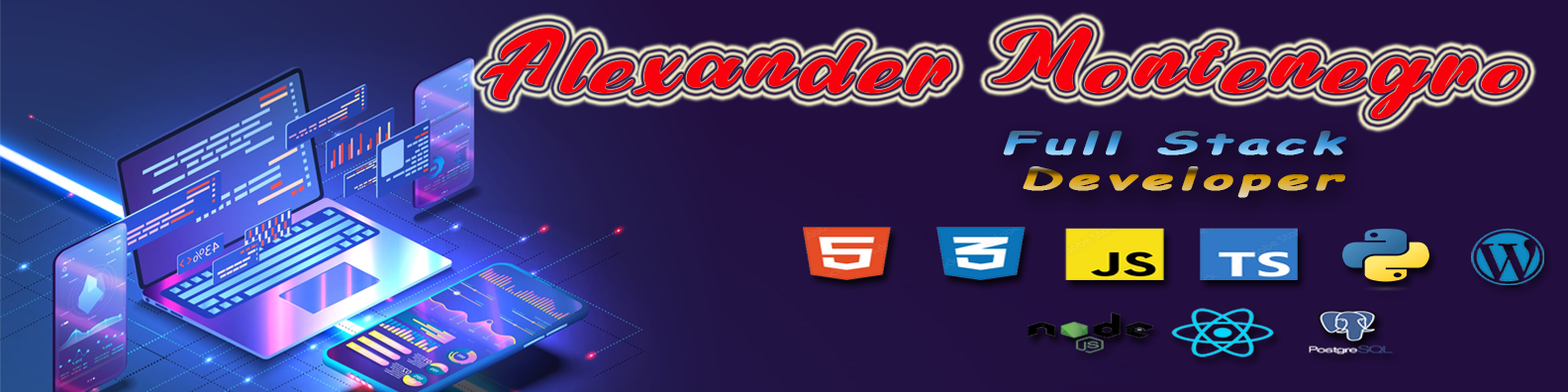
<style>
.page{position:relative;width:1568px;height:392px;background:#220e3f}
.page>*{position:absolute;margin:0}
.t1{font:78.1px "AucklandHills";letter-spacing:0.1em;color:#fa000c;font-style:italic;scale:1.29 1}
.t2{font:29.8px "ComicSansMS-Bold";letter-spacing:0.1em;font-weight:bold;font-style:italic;scale:1.89 1}
</style>
<div class="page">
<p class="t1" style="left:483px;top:27px;width:1040px;height:92px">Alexander Montenegro</p>
<p class="t2" style="left:1003px;top:131px;width:343px;height:67px;text-align:right">Full Stack<br>Developer</p>
</div>
